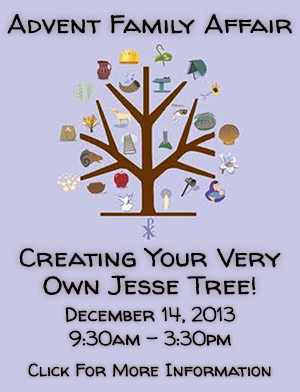
<style>
.page{position:relative;width:300px;height:392px;background:#c8c7e6}
.page>*{position:absolute;margin:0}
.t1{font:25.8px/27.7px "WalterTurncoat";color:#000000;scale:1.08 1}
.t2{font:25.8px/10.1px "WalterTurncoat";color:#000000;scale:1.08 1}
.t3{font:20px/9px "WalterTurncoat";color:#000000}
.t4{font:18px "WalterTurncoat";color:#000000}
</style>
<div class="page">
<p class="t1" style="left:7px;top:14px;width:285px;height:281px;text-align:center"><span class="t2">Advent Family Affair<br><br><br><br><br><br><br><br><br></span>Creating Your Very Own Jesse Tree!</p>
<p class="t3" style="left:65px;top:306px;width:171px;height:41px;text-align:center">December 14, 2013<br>9:30am - 3:30pm</p>
<p class="t4" style="left:28px;top:363px;width:243px;height:14px">Click For More Information</p>
</div>
